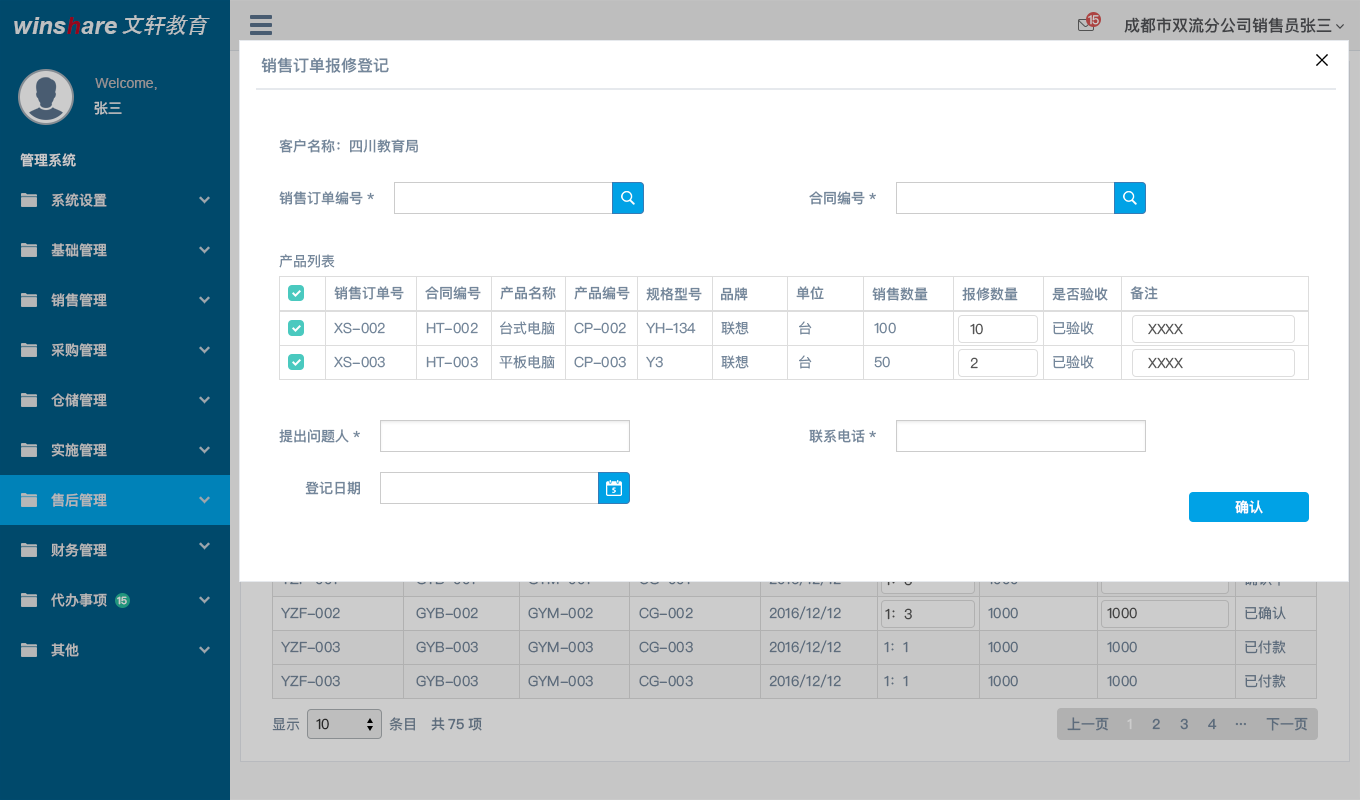
<style>
.page{position:relative;width:1360px;height:800px;background:#ffffff}
.page>*{position:absolute;margin:0}
.t1{font:24px "Arial-BoldItalicMT";color:#bdc0c1}
.t2{font:22px "STHeitiSC-Medium";color:#bdc0c1}
.t3{font:12px "PingFangSC-Regular";color:#cccccc}
.t4{font:16px "PingFangSC-Medium";color:#515356}
.t5{font:16px "PingFangSC-Medium";color:#74879b}
.t6{font:14px "ArialMT";color:#959393}
.t7{font:14px "PingFangSC-Medium";color:#bdc0c1}
.t8{font:14px "PingFangSC-Medium";color:#74879b}
.t9{font:14px "PingFangSC-Medium";color:#cccccc}
.t10{font:14px "PingFangSC-Medium";color:#b7b7b7}
.t11{font:14px "PingFangSC-Regular";color:#74879b}
.t12{font:14px "PingFangSC-Regular";color:#555555}
.t13{font:14px "PingFangSC-Medium";color:#ffffff}
.t14{font:10px "PingFangSC-Medium";color:#cccccc}
.t15{font:14px "PingFangSC-Regular";color:#5d6c7c}
.t16{font:14px "PingFangSC-Regular";color:#333333}
.t17{font:14px "PingFangSC-Medium";color:#5d6c7c}
.t18{font:14px "PingFangSC-Medium"}
</style>
<div class="page">
<p class="t1" style="left:14px;top:17px;width:103px;height:17px">winshare</p>
<p class="t2" style="left:122px;top:15px;width:88px;height:20px">文轩教育</p>
<p class="t3" style="left:1088px;top:15px;width:11px;height:10px">15</p>
<p class="t4" style="left:1124px;top:17px;width:208px;height:16px">成都市双流分公司销售员张三</p>
<p class="t5" style="left:261px;top:57px;width:128px;height:16px">销售订单报修登记</p>
<p class="t6" style="left:95px;top:78px;width:62px;height:12px">Welcome,</p>
<p class="t7" style="left:94px;top:101px;width:28px;height:14px">张三</p>
<p class="t8" style="left:279px;top:139px;width:139px;height:14px">客户名称：四川教育局</p>
<p class="t9" style="left:20px;top:153px;width:56px;height:14px">管理系统</p>
<p class="t10" style="left:51px;top:193px;width:56px;height:14px">系统设置</p>
<p class="t8" style="left:279px;top:191px;width:95px;height:14px">销售订单编号*</p>
<p class="t8" style="left:809px;top:191px;width:67px;height:14px">合同编号*</p>
<p class="t10" style="left:51px;top:243px;width:56px;height:14px">基础管理</p>
<p class="t11" style="left:279px;top:254px;width:56px;height:14px">产品列表</p>
<p class="t10" style="left:51px;top:293px;width:56px;height:14px">销售管理</p>
<p class="t8" style="left:334px;top:286px;width:70px;height:14px">销售订单号</p>
<p class="t8" style="left:425px;top:286px;width:56px;height:14px">合同编号</p>
<p class="t8" style="left:500px;top:286px;width:56px;height:14px">产品名称</p>
<p class="t8" style="left:574px;top:286px;width:56px;height:14px">产品编号</p>
<p class="t8" style="left:646px;top:287px;width:56px;height:14px">规格型号</p>
<p class="t8" style="left:721px;top:287px;width:27px;height:14px">品牌</p>
<p class="t8" style="left:796px;top:286px;width:28px;height:14px">单位</p>
<p class="t8" style="left:872px;top:287px;width:56px;height:14px">销售数量</p>
<p class="t8" style="left:962px;top:287px;width:56px;height:14px">报修数量</p>
<p class="t8" style="left:1052px;top:287px;width:56px;height:14px">是否验收</p>
<p class="t8" style="left:1130px;top:286px;width:28px;height:14px">备注</p>
<p class="t11" style="left:334px;top:322px;width:51px;height:12px">XS-002</p>
<p class="t11" style="left:426px;top:322px;width:52px;height:12px">HT-002</p>
<p class="t11" style="left:500px;top:321px;width:55px;height:14px">台式电脑</p>
<p class="t11" style="left:574px;top:322px;width:52px;height:12px">CP-002</p>
<p class="t11" style="left:646px;top:322px;width:50px;height:12px">YH-134</p>
<p class="t11" style="left:721px;top:321px;width:28px;height:14px">联想</p>
<p class="t11" style="left:799px;top:321px;width:13px;height:14px">台</p>
<p class="t11" style="left:874px;top:322px;width:22px;height:12px">100</p>
<p class="t12" style="left:970px;top:323px;width:13px;height:12px">10</p>
<p class="t11" style="left:1053px;top:321px;width:41px;height:14px">已验收</p>
<p class="t12" style="left:1148px;top:323px;width:35px;height:12px">XXXX</p>
<p class="t10" style="left:51px;top:343px;width:56px;height:14px">采购管理</p>
<p class="t11" style="left:334px;top:356px;width:51px;height:12px">XS-003</p>
<p class="t11" style="left:426px;top:356px;width:52px;height:12px">HT-003</p>
<p class="t11" style="left:499px;top:355px;width:56px;height:14px">平板电脑</p>
<p class="t11" style="left:574px;top:356px;width:52px;height:12px">CP-003</p>
<p class="t11" style="left:646px;top:356px;width:17px;height:12px">Y3</p>
<p class="t11" style="left:721px;top:355px;width:28px;height:14px">联想</p>
<p class="t11" style="left:799px;top:355px;width:13px;height:14px">台</p>
<p class="t11" style="left:874px;top:356px;width:16px;height:12px">50</p>
<p class="t12" style="left:970px;top:357px;width:8px;height:12px">2</p>
<p class="t11" style="left:1053px;top:355px;width:41px;height:14px">已验收</p>
<p class="t12" style="left:1148px;top:357px;width:35px;height:12px">XXXX</p>
<p class="t10" style="left:51px;top:393px;width:56px;height:14px">仓储管理</p>
<p class="t8" style="left:279px;top:429px;width:81px;height:14px">提出问题人*</p>
<p class="t8" style="left:809px;top:429px;width:67px;height:14px">联系电话*</p>
<p class="t10" style="left:51px;top:443px;width:56px;height:14px">实施管理</p>
<p class="t8" style="left:305px;top:481px;width:55px;height:14px">登记日期</p>
<p class="t10" style="left:51px;top:493px;width:56px;height:14px">售后管理</p>
<p class="t13" style="left:1235px;top:500px;width:28px;height:14px">确认</p>
<p class="t10" style="left:51px;top:543px;width:56px;height:14px">财务管理</p>
<p class="t10" style="left:51px;top:593px;width:56px;height:14px">代办事项</p>
<p class="t14" style="left:117px;top:596px;width:10px;height:9px">15</p>
<p class="t15" style="left:769px;top:606px;width:72px;height:14px">2016/12/12</p>
<p class="t15" style="left:1245px;top:606px;width:41px;height:14px">已确认</p>
<p class="t15" style="left:281px;top:607px;width:59px;height:12px">YZF-002</p>
<p class="t15" style="left:416px;top:607px;width:62px;height:12px">GYB-002</p>
<p class="t15" style="left:528px;top:607px;width:65px;height:12px">GYM-002</p>
<p class="t15" style="left:639px;top:607px;width:54px;height:12px">CG-002</p>
<p class="t12" style="left:885px;top:608px;width:27px;height:12px">1：3</p>
<p class="t15" style="left:988px;top:607px;width:30px;height:12px">1000</p>
<p class="t12" style="left:1107px;top:607px;width:30px;height:12px">1000</p>
<p class="t15" style="left:281px;top:641px;width:59px;height:12px">YZF-003</p>
<p class="t15" style="left:416px;top:641px;width:62px;height:12px">GYB-003</p>
<p class="t15" style="left:528px;top:641px;width:65px;height:12px">GYM-003</p>
<p class="t15" style="left:639px;top:641px;width:54px;height:12px">CG-003</p>
<p class="t15" style="left:769px;top:640px;width:72px;height:14px">2016/12/12</p>
<p class="t15" style="left:884px;top:641px;width:24px;height:12px">1：1</p>
<p class="t15" style="left:988px;top:641px;width:30px;height:12px">1000</p>
<p class="t15" style="left:1107px;top:641px;width:30px;height:12px">1000</p>
<p class="t15" style="left:1245px;top:640px;width:41px;height:14px">已付款</p>
<p class="t10" style="left:51px;top:643px;width:28px;height:14px">其他</p>
<p class="t15" style="left:281px;top:675px;width:59px;height:12px">YZF-003</p>
<p class="t15" style="left:416px;top:675px;width:62px;height:12px">GYB-003</p>
<p class="t15" style="left:528px;top:675px;width:65px;height:12px">GYM-003</p>
<p class="t15" style="left:639px;top:675px;width:54px;height:12px">CG-003</p>
<p class="t15" style="left:769px;top:674px;width:72px;height:14px">2016/12/12</p>
<p class="t15" style="left:884px;top:675px;width:24px;height:12px">1：1</p>
<p class="t15" style="left:988px;top:675px;width:30px;height:12px">1000</p>
<p class="t15" style="left:1107px;top:675px;width:30px;height:12px">1000</p>
<p class="t15" style="left:1245px;top:674px;width:41px;height:14px">已付款</p>
<p class="t15" style="left:272px;top:718px;width:28px;height:13px">显示</p>
<p class="t16" style="left:316px;top:718px;width:13px;height:12px">10</p>
<p class="t15" style="left:389px;top:717px;width:26px;height:14px">条目</p>
<p class="t17" style="left:431px;top:717px;width:51px;height:14px">共75项</p>
<p class="t17" style="left:1067px;top:717px;width:42px;height:14px">上一页</p>
<p class="t9" style="left:1127px;top:718px;width:5px;height:12px">1</p>
<p class="t17" style="left:1152px;top:718px;width:8px;height:12px">2</p>
<p class="t17" style="left:1180px;top:718px;width:8px;height:12px">3</p>
<p class="t17" style="left:1208px;top:718px;width:9px;height:12px">4</p>
<p class="t18" style="left:1235px;top:722px;width:11px;height:4px">...</p>
<p class="t17" style="left:1266px;top:717px;width:42px;height:14px">下一页</p>
</div>
